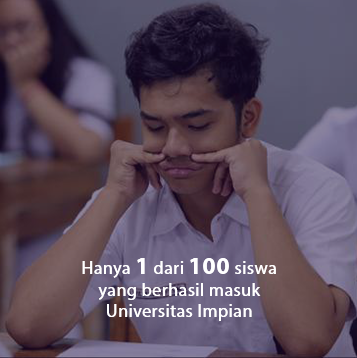
<style>
.page{position:relative;width:357px;height:358px}
.page>*{position:absolute;margin:0}
.t1{font:18px "MyriadPro-Regular";letter-spacing:0.025em;color:#ffffff}
.t2{font:24px "MyriadPro-Bold";letter-spacing:0.025em;color:#ffffff}
</style>
<div class="page">
<p class="t1" style="left:82px;top:258px;width:194px;height:63px;text-align:center">Hanya <span class="t2">1</span> dari <span class="t2">100</span> siswa<br>yang berhasil masuk<br>Universitas Impian</p>
</div>
